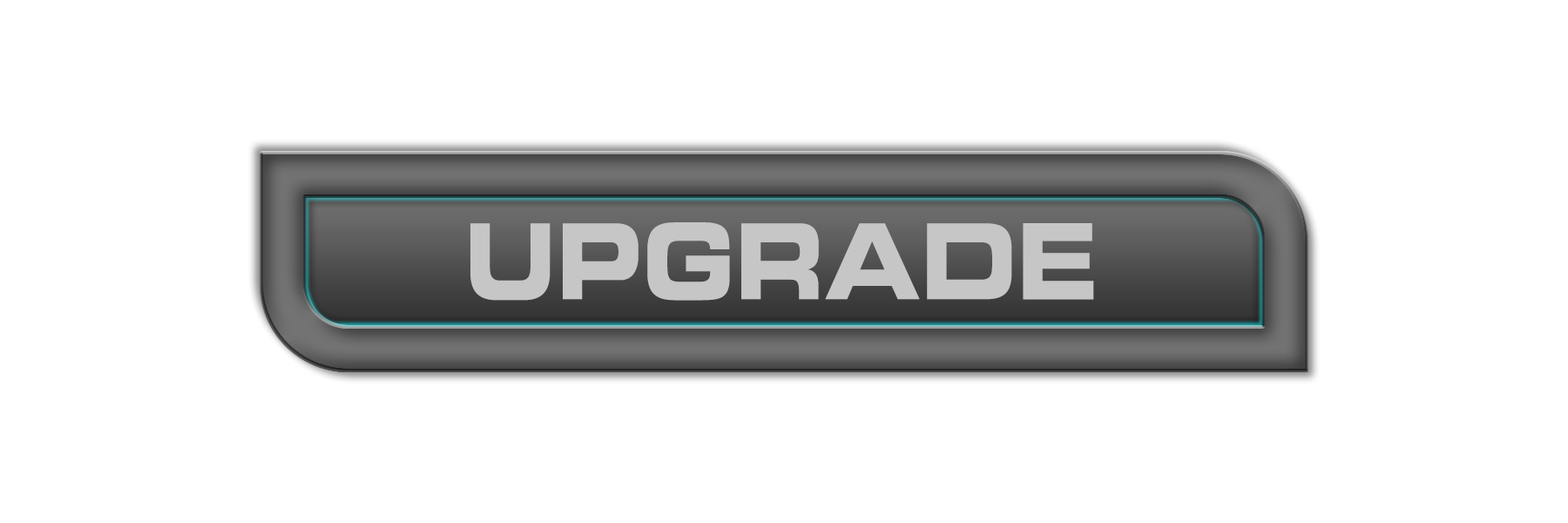
<style>
.page{position:relative;width:1568px;height:523px;background:#ffffff}
.page>*{position:absolute;margin:0}
.t1{font:104.5px "EurostileLTStd-BoldEx2";color:#c6c6c6;scale:0.83 1}
</style>
<div class="page">
<p class="t1" style="left:470px;top:222px;width:624px;height:79px">UPGRADE</p>
</div>
